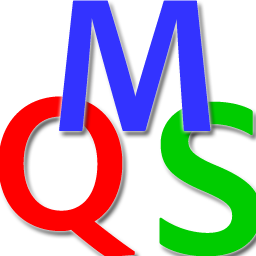
<style>
.page{position:relative;width:256px;height:256px;background:#ffffff}
.page>*{position:absolute;margin:0}
.t1{font:200px "AdobeClean-Bold";color:#3333ff}
.t2{font:200px "AdobeClean-Bold";color:#ff0000}
</style>
<div class="page">
<p class="t1" style="left:59px;top:0px;width:152px;height:131px">M</p>
<p class="t2" style="left:0px;top:96px;width:135px;height:162px">Q</p>
</div>
